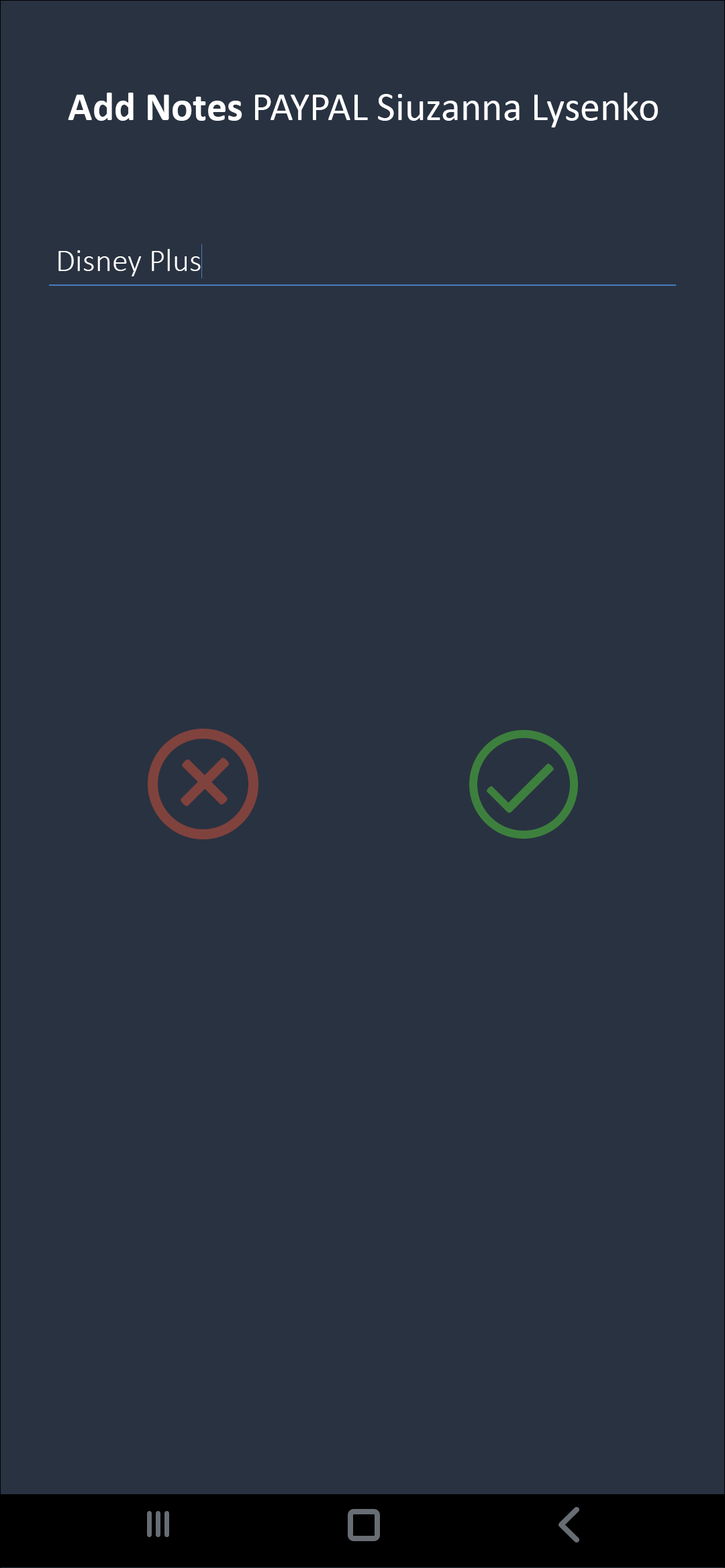
<style>
.page{position:relative;width:725px;height:1568px;background:#293241}
.page>*{position:absolute;margin:0}
.t1{font:40.3px "Calibri";color:#ffffff}
.t2{font:40.3px "Calibri-Bold";color:#ffffff}
.t3{font:32.2px "Calibri-Light";color:#ffffff}
.t4{font:134.2px "Calibri";color:#80423d}
.t5{font:100.6px "Calibri";color:#3d803d}
</style>
<div class="page">
<p class="t1" style="left:68px;top:93px;width:590px;height:34px"><span class="t2">Add Notes </span>PAYPAL Siuzanna Lysenko</p>
<p class="t3" style="left:58px;top:249px;width:143px;height:27px">Disney Plus</p>
<p class="t4" style="left:180px;top:757px;width:49px;height:49px;rotate:45deg">+</p>
<p class="t5" style="left:486px;top:764px;width:68px;height:49px;rotate:-135deg">L</p>
</div>
